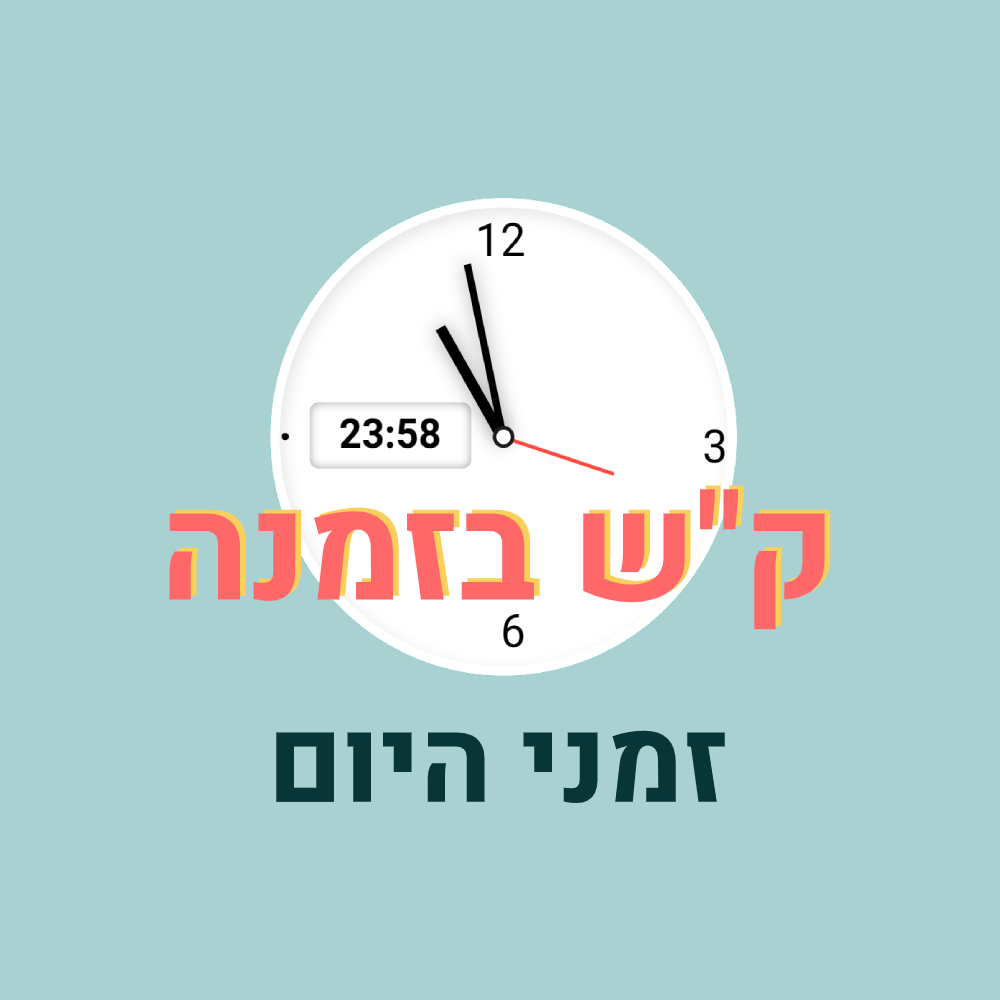
<style>
.page{position:relative;width:1000px;height:1000px;background:#aad1d1}
.page>*{position:absolute;margin:0}
.t1{font:147px "Heebo-Bold";color:#ff6868}
.t2{font:118.6px "Heebo-Bold";color:#083538}
</style>
<div class="page">
<p class="t1" style="left:175px;top:485px;width:656px;height:141px">ק"ש בזמנה</p>
<p class="t1" style="left:169px;top:489px;width:656px;height:141px">ק"ש בזמנה</p>
<p class="t2" style="left:276px;top:730px;width:449px;height:73px">זמני היום</p>
</div>
